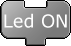
<style>
.page{position:relative;width:71px;height:46px;background:#ffffff}
.page>*{position:absolute;margin:0}
.t1{font:18px "Verdana";color:#ffffff}
</style>
<div class="page">
<p class="t1" style="left:4px;top:13px;width:63px;height:15px">Led ON</p>
</div>
